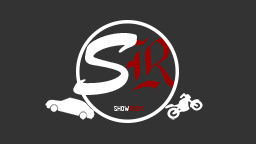
<style>
.page{position:relative;width:256px;height:144px;background:#333333}
.page>*{position:absolute;margin:0}
.t1{font:90px "BrushScriptStd";color:#ffffff;scale:0.94 1}
.t2{font:66.7px "GothicE";color:#9b0000}
.t3{font:6.7px "ISOCPEUR";color:#ffffff}
.t4{font:6.7px "ISOCPEUR";color:#9b0000}
</style>
<div class="page">
<p class="t1" style="left:73px;top:33px;width:64px;height:62px">S</p>
<p class="t2" style="left:123px;top:37px;width:54px;height:54px;rotate:-4deg">R</p>
<p class="t3" style="left:114px;top:106px;width:29px;height:5px">SHOW<span class="t4">ROOM</span></p>
</div>
